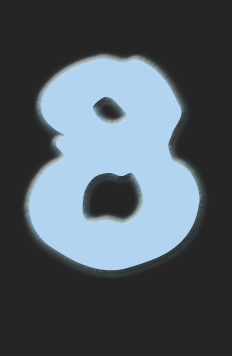
<style>
.page{position:relative;width:232px;height:356px;background:#252525}
.page>*{position:absolute;margin:0}
.t1{font:300px "Misbehavin'";color:#b2d4f0}
</style>
<div class="page">
<p class="t1" style="left:29px;top:59px;width:171px;height:212px">8</p>
</div>
